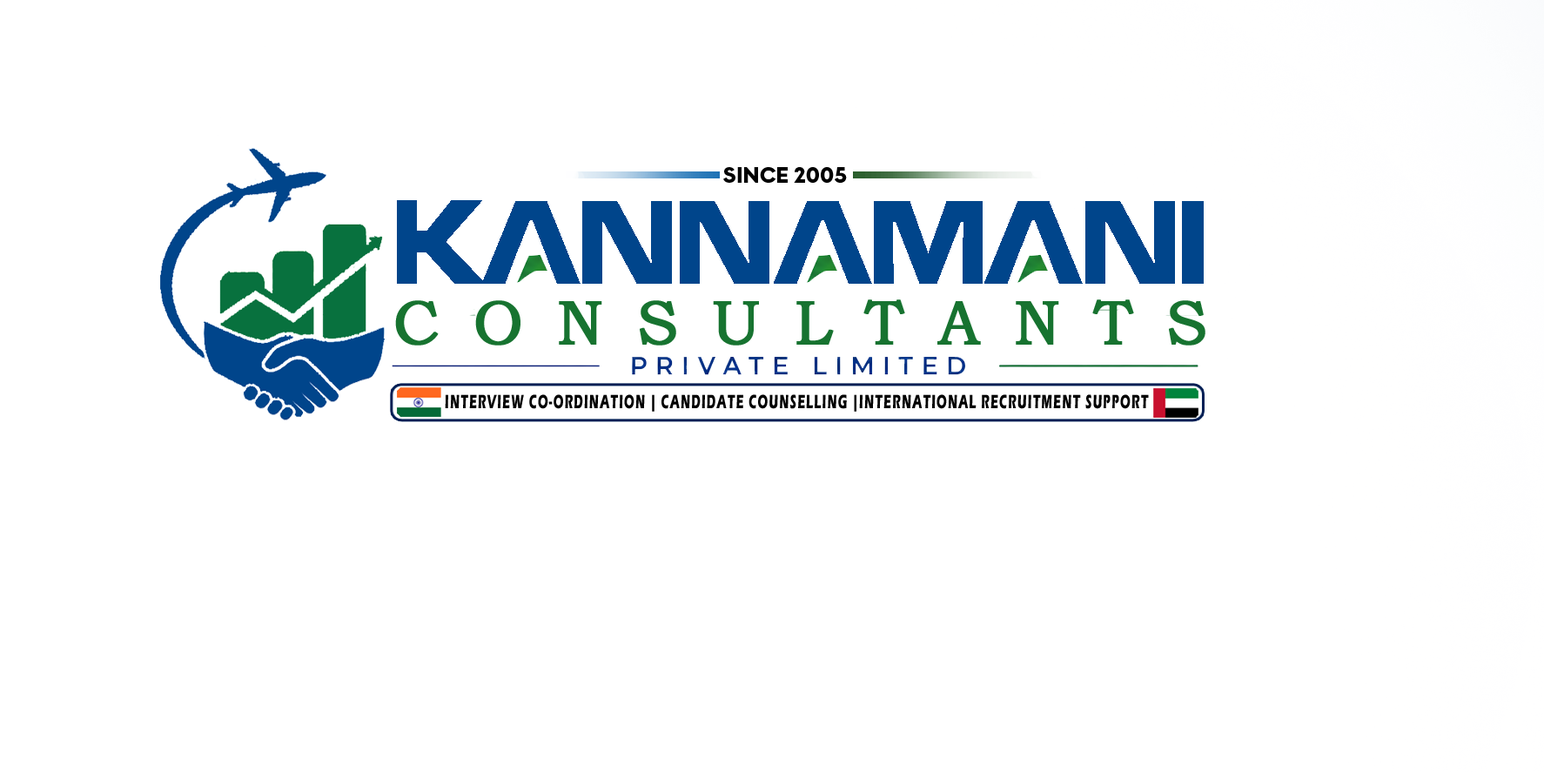
<style>
.page{position:relative;width:1544px;height:772px;background:#ffffff}
.page>*{position:absolute;margin:0}
.t1{font:62.7px "BookmanOldStyle";letter-spacing:0.52em;color:#177330;font-weight:bold}
.t2{font:19.9px "ErasITC-Bold";letter-spacing:0.1em;color:#000000;scale:0.59 1}
</style>
<div class="page">
<p class="t1" style="left:395px;top:299px;width:811px;height:47px">CONSULTANTS</p>
<p class="t2" style="left:445px;top:394px;width:704px;height:18px">INTERVIEW CO-ORDINATION | CANDIDATE COUNSELLING |INTERNATIONAL RECRUITMENT SUPPORT</p>
</div>
